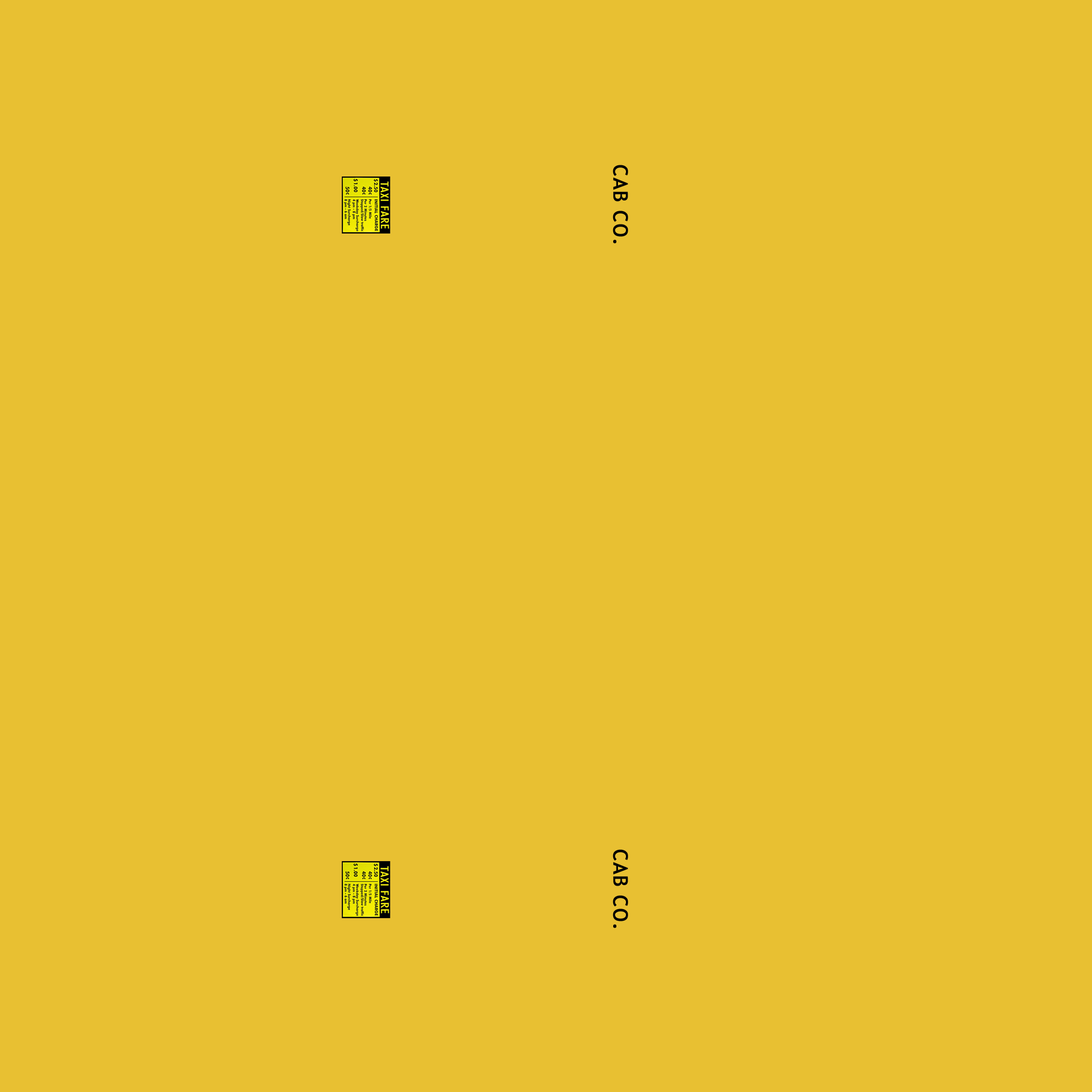
<style>
.page{position:relative;width:1092px;height:1092px;background:#e8c032}
.page>*{position:absolute;margin:0}
.t1{font:19.7px "TrebuchetMS";letter-spacing:0.04em;color:#010101;font-weight:bold}
</style>
<div class="page">
<p class="t1" style="left:613px;top:165px;width:15px;height:79px;rotate:90deg">CAB CO.</p>
<p class="t1" style="left:613px;top:849px;width:15px;height:79px;rotate:90deg">CAB CO.</p>
</div>
